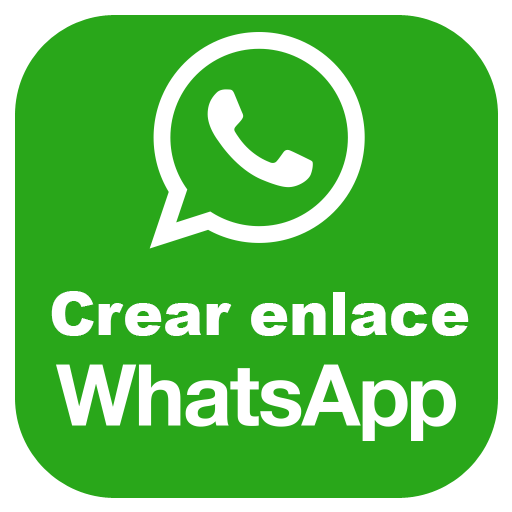
<style>
.page{position:relative;width:512px;height:512px;background:#29a71a}
.page>*{position:absolute;margin:0}
.t1{font:60px "Arial-Black";color:#ffffff}
</style>
<div class="page">
<p class="t1" style="left:51px;top:291px;width:418px;height:45px">Crear enlace</p>
</div>
